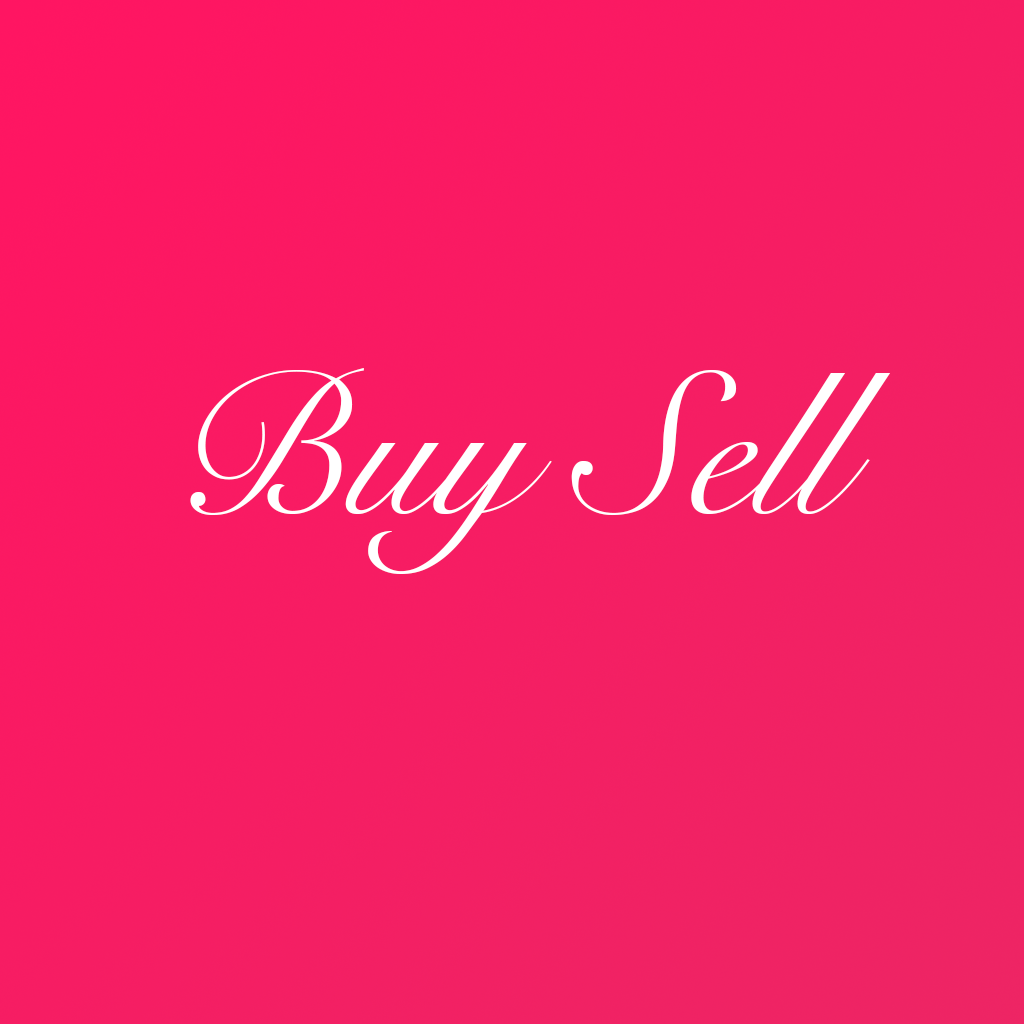
<style>
.page{position:relative;width:1024px;height:1024px}
.page>*{position:absolute;margin:0}
.t1{font:200px "SnellRoundhand";color:#ffffff}
</style>
<div class="page">
<p class="t1" style="left:190px;top:368px;width:700px;height:206px">Buy Sell</p>
</div>
